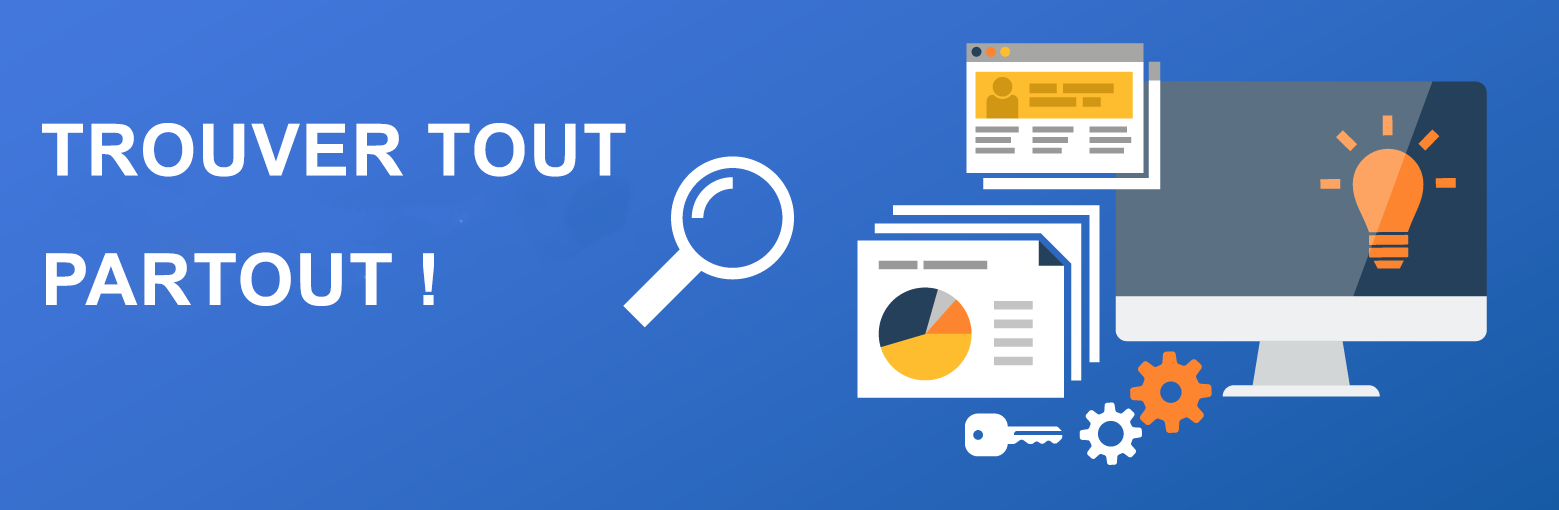
<style>
.page{position:relative;width:1559px;height:510px}
.page>*{position:absolute;margin:0}
.t1{font:72px "Arial-BoldMT";letter-spacing:0.025em;color:#ffffff}
</style>
<div class="page">
<p class="t1" style="left:42px;top:123px;width:584px;height:54px">TROUVER TOUT</p>
<p class="t1" style="left:46px;top:252px;width:388px;height:54px">PARTOUT !</p>
</div>
